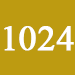
<style>
.page{position:relative;width:75px;height:75px;background:#bd9b11}
.page>*{position:absolute;margin:0}
.t1{font:36px "TimesNewRomanPSMT";color:#ffffff;font-weight:bold}
</style>
<div class="page">
<p class="t1" style="left:4px;top:26px;width:70px;height:25px">1024</p>
</div>
